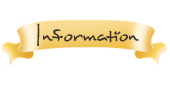
<style>
.page{position:relative;width:170px;height:88px;background:#ffffff}
.page>*{position:absolute;margin:0}
.t1{font:31.2px "MaxineScript";color:#37332f}
</style>
<div class="page">
<p class="t1" style="left:37px;top:23px;width:102px;height:23px">Information</p>
</div>
